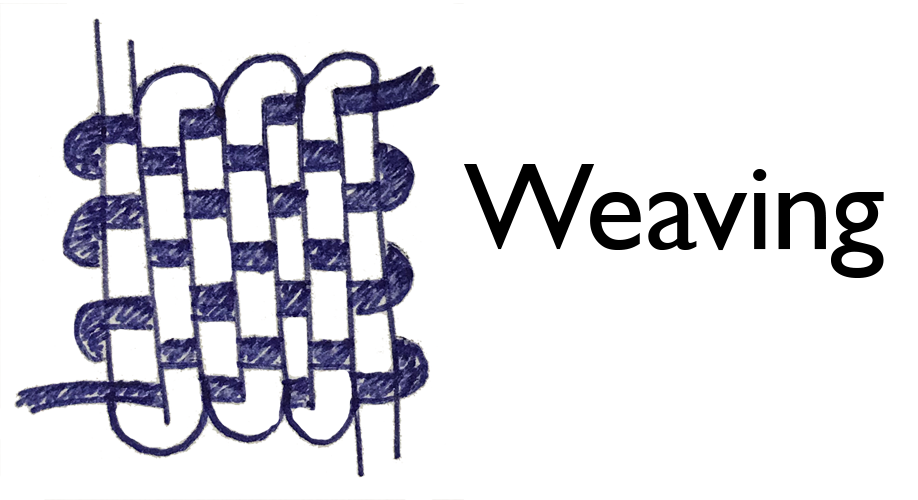
<style>
.page{position:relative;width:918px;height:500px;background:#ffffff}
.page>*{position:absolute;margin:0}
.t1{font:125px "GillSans";color:#000000}
</style>
<div class="page">
<p class="t1" style="left:464px;top:164px;width:420px;height:114px">Weaving</p>
</div>
